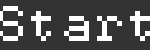
<style>
.page{position:relative;width:150px;height:50px;background:#333333}
.page>*{position:absolute;margin:0}
.t1{font:44px "Terminal";color:#ffffff}
</style>
<div class="page">
<p class="t1" style="left:0px;top:6px;width:150px;height:35px">Start</p>
</div>
